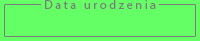
<style>
.page{position:relative;width:200px;height:41px;background:#64ff64}
.page>*{position:absolute;margin:0}
.t1{font:12.5px "MyriadPro-Regular";letter-spacing:0.2em;color:#7c7c7c}
</style>
<div class="page">
<p class="t1" style="left:45px;top:0px;width:111px;height:9px">Data urodzenia</p>
</div>
